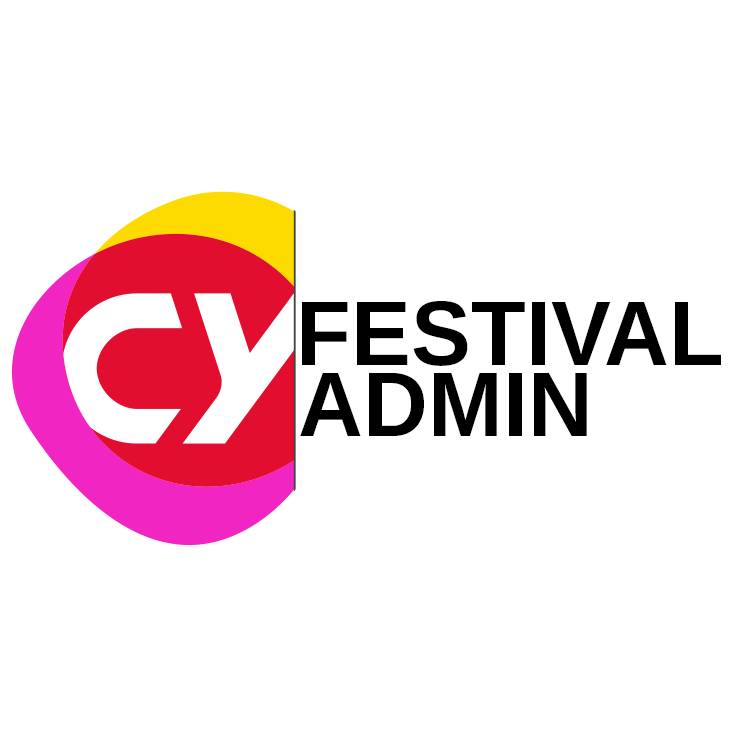
<style>
.page{position:relative;width:735px;height:736px;background:#ffffff}
.page>*{position:absolute;margin:0}
.t1{font:91.7px "LiberationSans-Bold";color:#000000;text-transform:uppercase}
</style>
<div class="page">
<p class="t1" style="left:302px;top:301px;width:419px;height:65px">FESTIVAL</p>
<p class="t1" style="left:300px;top:373px;width:287px;height:63px">Admin</p>
</div>
